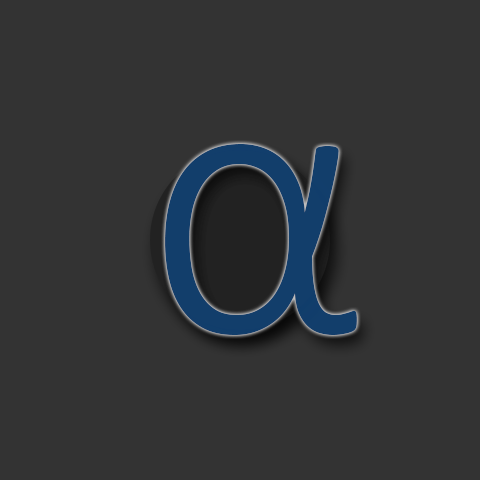
<style>
.page{position:relative;width:480px;height:480px;background:#333333}
.page>*{position:absolute;margin:0}
.t1{font:400px "Calibri-Light";letter-spacing:-0.02em;color:#123e6b}
</style>
<div class="page">
<p class="t1" style="left:165px;top:144px;width:192px;height:191px">α</p>
</div>
